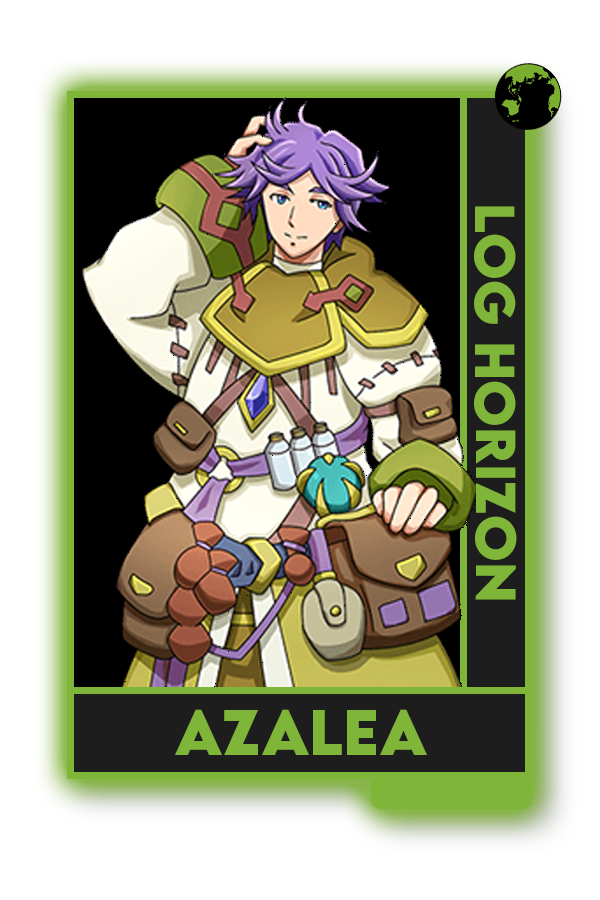
<style>
.page{position:relative;width:600px;height:900px;background:#ffffff}
.page>*{position:absolute;margin:0}
.t1{font:50px "LEMONMILK-Bold";color:#7fad41}
.t2{font:56.7px "LEMONMILK-Bold";color:#7fad41}
</style>
<div class="page">
<p class="t1" style="left:474px;top:206px;width:43px;height:394px;rotate:90deg">Log Horizon</p>
<p class="t2" style="left:175px;top:709px;width:252px;height:46px">Azalea</p>
</div>
